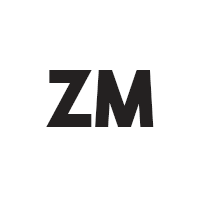
<style>
.page{position:relative;width:200px;height:200px;background:#ffffff}
.page>*{position:absolute;margin:0}
.t1{font:76.7px "TheBoldFont";color:#242121}
</style>
<div class="page">
<p class="t1" style="left:46px;top:70px;width:108px;height:57px">ZM</p>
</div>
